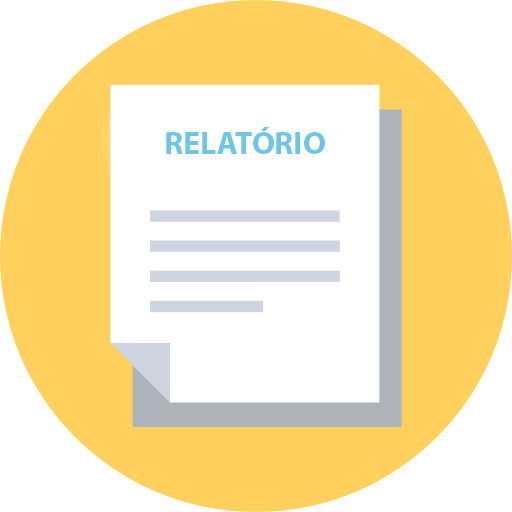
<style>
.page{position:relative;width:512px;height:512px;background:#ffffff}
.page>*{position:absolute;margin:0}
.t1{font:32px "MyriadPro-Bold";color:#6bc6e8}
</style>
<div class="page">
<p class="t1" style="left:166px;top:127px;width:159px;height:27px">RELATÓRIO</p>
</div>
